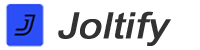
<style>
.page{position:relative;width:200px;height:50px;background:#ffffff}
.page>*{position:absolute;margin:0}
.t1{font:36px "ArialMT";color:#323232;font-weight:bold;font-style:italic;scale:1.12 1}
</style>
<div class="page">
<p class="t1" style="left:58px;top:11px;width:113px;height:35px">Joltify</p>
</div>
